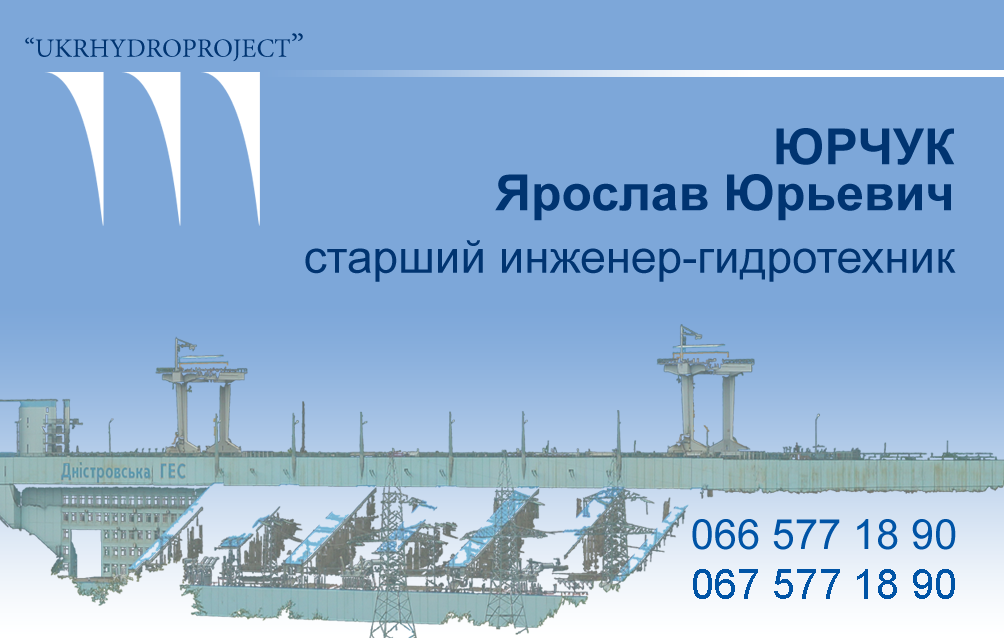
<style>
.page{position:relative;width:1004px;height:638px;background:#7da7d9}
.page>*{position:absolute;margin:0}
.t1{font:26.7px "MinionPro-Regular";color:#003471}
.t2{font:33.4px "MinionPro-Regular";color:#003471}
.t3{font:50px/45.8px "Arial-BoldMT";color:#003471}
.t4{font:45.8px "ArialMT";color:#003471}
.t5{font:50px "Arial-BoldMT";color:#003471}
.t6{font:41.7px "ArialMT";color:#0054a6}
</style>
<div class="page">
<p class="t1" style="left:25px;top:33px;width:278px;height:29px">“UKRHYDROPROJECT<span class="t2">”</span></p>
<p class="t3" style="left:495px;top:128px;width:460px;height:93px;text-align:right">ЮРЧУК<br>Ярослав Юрьевич</p>
<p class="t4" style="left:305px;top:240px;width:651px;height:42px"><span class="t5"><br><br></span>старший инженер-гидротехник</p>
<p class="t6" style="left:692px;top:519px;width:264px;height:31px">066 577 18 90</p>
<p class="t6" style="left:693px;top:569px;width:262px;height:30px">067 577 18 90</p>
</div>
